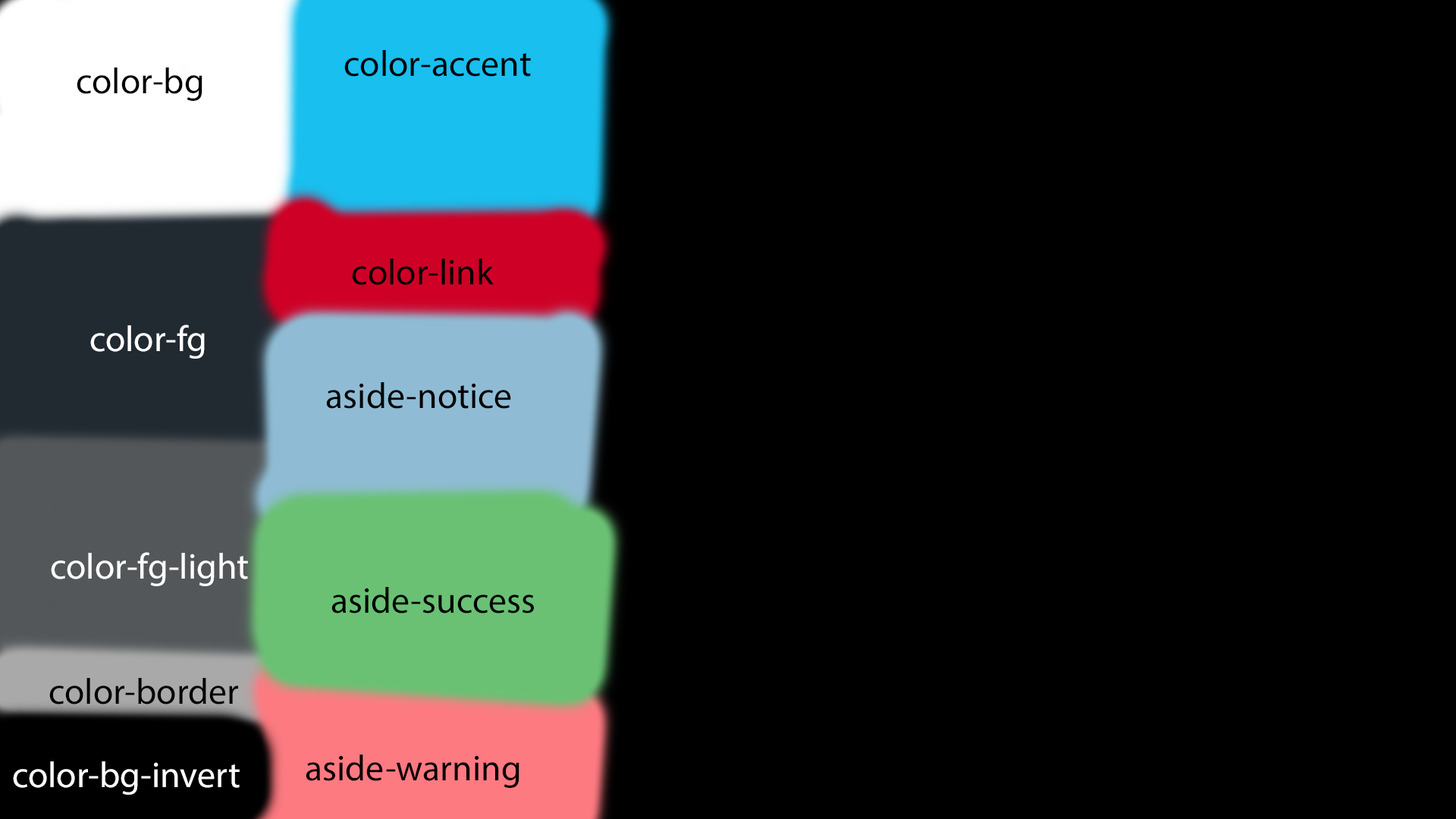
<style>
.page{position:relative;width:1456px;height:819px;background:#000000}
.page>*{position:absolute;margin:0}
.t1{font:36.4px "MyriadPro-Regular";color:#000000}
.t2{font:36.4px "MyriadPro-Regular";color:#ffffff}
</style>
<div class="page">
<p class="t1" style="left:344px;top:50px;width:187px;height:27px">color-accent</p>
<p class="t1" style="left:77px;top:67px;width:125px;height:34px">color-bg</p>
<p class="t1" style="left:352px;top:259px;width:142px;height:26px">color-link</p>
<p class="t2" style="left:90px;top:325px;width:115px;height:34px">color-fg</p>
<p class="t1" style="left:326px;top:382px;width:185px;height:27px">aside-notice</p>
<p class="t2" style="left:51px;top:552px;width:197px;height:34px">color-fg-light</p>
<p class="t1" style="left:331px;top:587px;width:203px;height:26px">aside-success</p>
<p class="t1" style="left:49px;top:678px;width:189px;height:26px">color-border</p>
<p class="t2" style="left:13px;top:761px;width:227px;height:34px">color-bg-invert</p>
<p class="t1" style="left:306px;top:755px;width:213px;height:33px">aside-warning</p>
</div>
